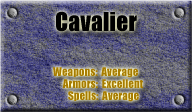
<style>
.page{position:relative;width:192px;height:112px}
.page>*{position:absolute;margin:0}
.t1{font:24px "Impact";color:#000000}
.t2{font:11px "Impact";color:#a77c00}
</style>
<div class="page">
<p class="t1" style="left:56px;top:11px;width:81px;height:21px">Cavalier</p>
<p class="t2" style="left:53px;top:67px;width:85px;height:11px">Weapons:  Average</p>
<p class="t2" style="left:62px;top:79px;width:81px;height:9px">Armors:  Excellent</p>
<p class="t2" style="left:68px;top:91px;width:71px;height:11px">Spells:  Average</p>
</div>
